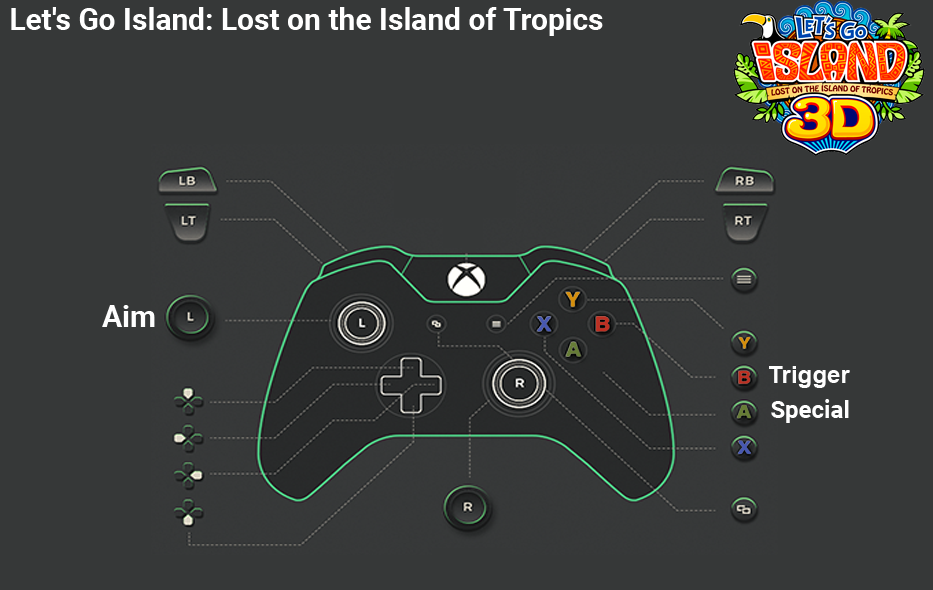
<style>
.page{position:relative;width:933px;height:590px;background:#363838}
.page>*{position:absolute;margin:0}
.t1{font:30px "Roboto-Bold";color:#ffffff}
.t2{font:30px "Roboto-Bold";color:#fefefe}
.t3{font:24px "Arial-BoldMT";color:#fefefe}
.t4{font:24px "Roboto-Bold";color:#ffffff}
</style>
<div class="page">
<p class="t1" style="left:11px;top:7px;width:592px;height:29px">Let's Go Island: Lost on the Island of Tropics</p>
<p class="t2" style="left:102px;top:305px;width:53px;height:22px">Aim</p>
<p class="t3" style="left:769px;top:366px;width:81px;height:22px">Trigger</p>
<p class="t4" style="left:771px;top:399px;width:78px;height:24px">Special</p>
</div>
